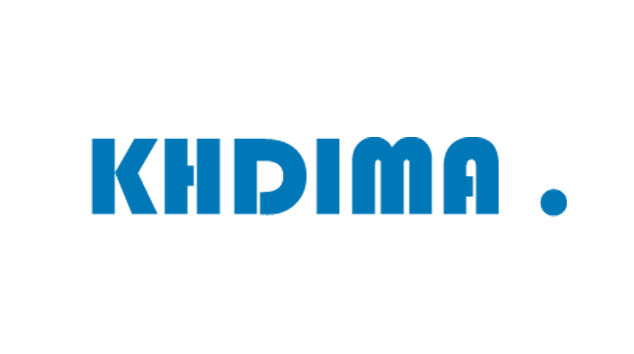
<style>
.page{position:relative;width:634px;height:354px;background:#ffffff}
.page>*{position:absolute;margin:0}
.t1{font:112.5px "Bauhaus93";color:#0077b6}
</style>
<div class="page">
<p class="t1" style="left:91px;top:137px;width:476px;height:80px">KHDIMA .</p>
</div>
